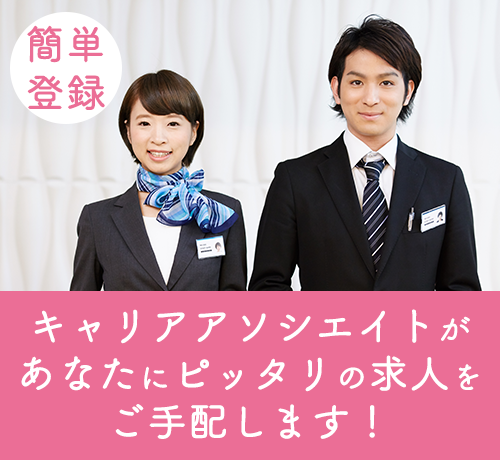
<style>
.page{position:relative;width:500px;height:460px;background:#eb6e96}
.page>*{position:absolute;margin:0}
.t1{font:40px "TsukuBRdGothic-Regular";color:#eb6e96;font-weight:bold}
.t2{font:40px "TsukuBRdGothic-Regular";color:#ffffff;font-weight:bold}
.t3{font:32px "TsukuBRdGothic-Regular";color:#ffffff;font-weight:bold}
</style>
<div class="page">
<p class="t1" style="left:27px;top:25px;width:78px;height:85px;text-align:center">簡単<br>登録</p>
<p class="t2" style="left:21px;top:309px;width:458px;height:130px;text-align:center">キャリアアソシエイト<span class="t3">が<br></span>あなた<span class="t3">に</span>ピッタリ<span class="t3">の</span>求人<span class="t3">を<br></span>ご手配します！</p>
</div>
